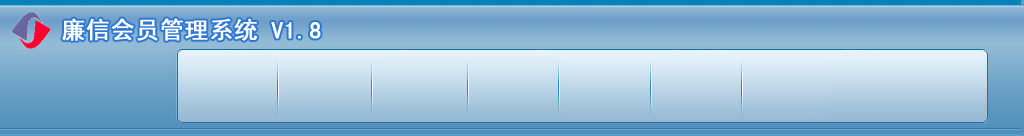
<style>
.page{position:relative;width:1024px;height:136px}
.page>*{position:absolute;margin:0}
.t1{font:24px "SimHei";color:#ffffff;font-weight:bold}
</style>
<div class="page">
<p class="t1" style="left:62px;top:18px;width:259px;height:23px">廉信会员管理系统 V1.8</p>
</div>
